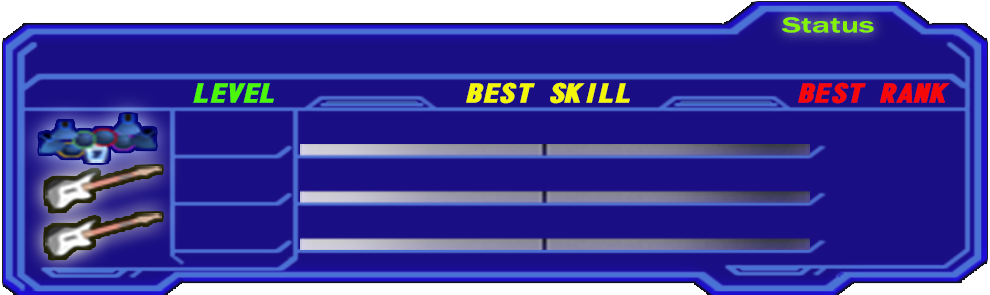
<style>
.page{position:relative;width:990px;height:295px;background:#190e83}
.page>*{position:absolute;margin:0}
.t1{font:22.1px "FranklinGothic-Medium";color:#84f400;scale:1.52 1}
.t2{font:24.8px "DFGothic-SU-WIN-RKSJ-H";color:#4bf608;font-style:italic;scale:1.33 1}
.t3{font:24.8px "DFGothic-SU-WIN-RKSJ-H";color:#f3f608;font-style:italic;scale:1.33 1}
.t4{font:24.8px "DFGothic-SU-WIN-RKSJ-H";color:#f60808;font-style:italic;scale:1.33 1}
</style>
<div class="page">
<p class="t1" style="left:782px;top:17px;width:92px;height:16px">Status</p>
<p class="t2" style="left:193px;top:83px;width:81px;height:20px">LEVEL</p>
<p class="t3" style="left:466px;top:82px;width:164px;height:22px">BEST SKILL</p>
<p class="t4" style="left:798px;top:82px;width:152px;height:22px">BEST RANK</p>
</div>
